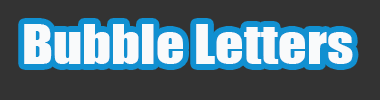
<style>
.page{position:relative;width:380px;height:100px;background:#333333}
.page>*{position:absolute;margin:0}
.t1{font:50px "Impact";color:#f9fafb;scale:1.12 1}
</style>
<div class="page">
<p class="t1" style="left:24px;top:24px;width:329px;height:40px">Bubble Letters</p>
</div>
